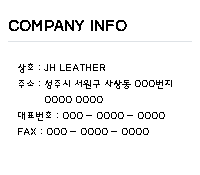
<style>
.page{position:relative;width:200px;height:175px;background:#ffffff}
.page>*{position:absolute;margin:0}
.t1{font:16px "HaanBaekjeB";color:#000000}
.t2{font:10px/16px "HaanYGodic23";color:#000000}
</style>
<div class="page">
<p class="t1" style="left:9px;top:20px;width:118px;height:11px">COMPANY INFO</p>
<p class="t2" style="left:18px;top:63px;width:154px;height:72px">상호 : JH LEATHER<br>주소 : 청주시 서원구 사창동 000번지 <br>         0000 0000<br>대표번호 : 000 - 0000 - 0000<br>FAX : 000 - 0000 - 0000</p>
</div>
